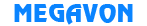
<style>
.page{position:relative;width:147px;height:26px;background:#ffffff}
.page>*{position:absolute;margin:0}
.t1{font:22px "VNI-Revue-Bold";color:#0a84ff}
</style>
<div class="page">
<p class="t1" style="left:14px;top:4px;width:119px;height:21px">MEGAVON</p>
</div>
